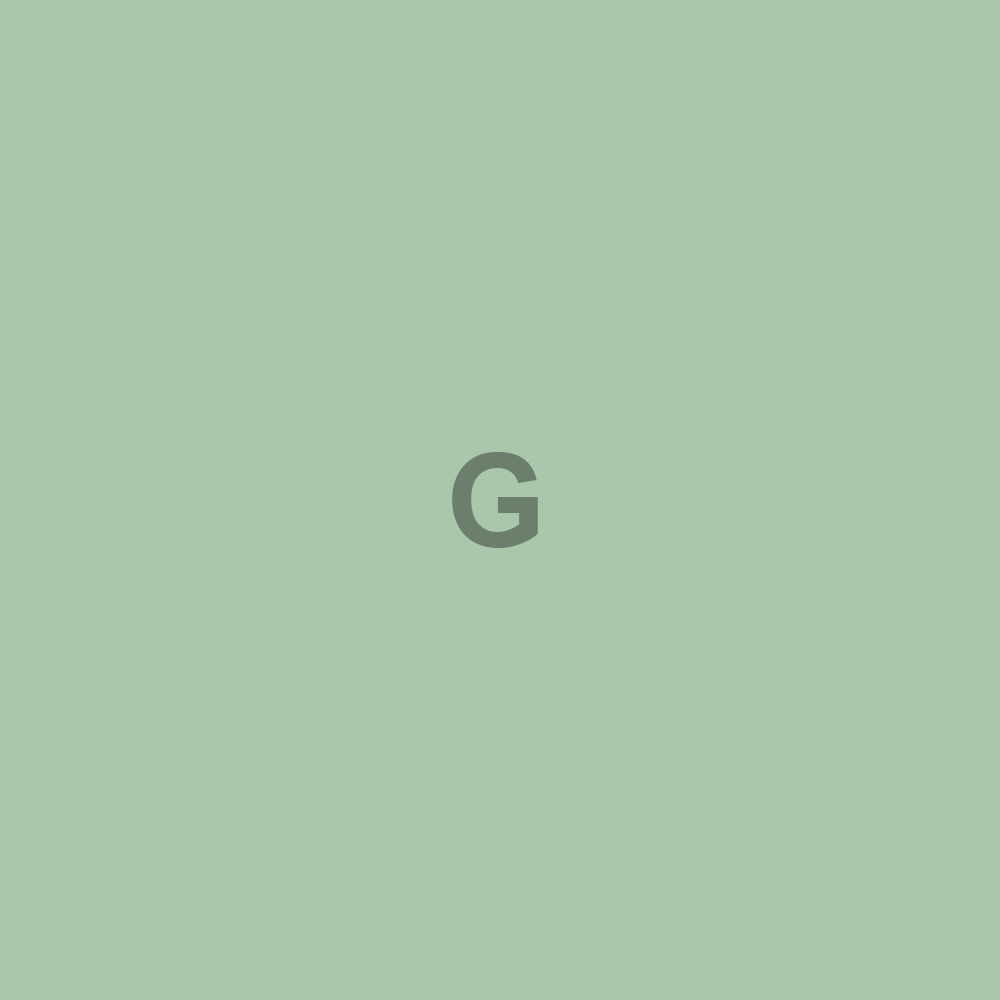
<style>
.page{position:relative;width:1000px;height:1000px;background:#abc7ab}
.page>*{position:absolute;margin:0}
.t1{font:127.7px "Arial-BoldMT";color:#6c7e6c}
</style>
<div class="page">
<p class="t1" style="left:452px;top:452px;width:86px;height:96px">G</p>
</div>
